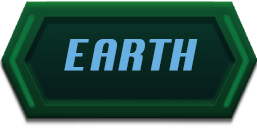
<style>
.page{position:relative;width:257px;height:128px}
.page>*{position:absolute;margin:0}
.t1{font:41.2px "Silom";color:#67b0e1;font-weight:bold;font-style:italic}
</style>
<div class="page">
<p class="t1" style="left:64px;top:39px;width:134px;height:32px">EARTH</p>
</div>
